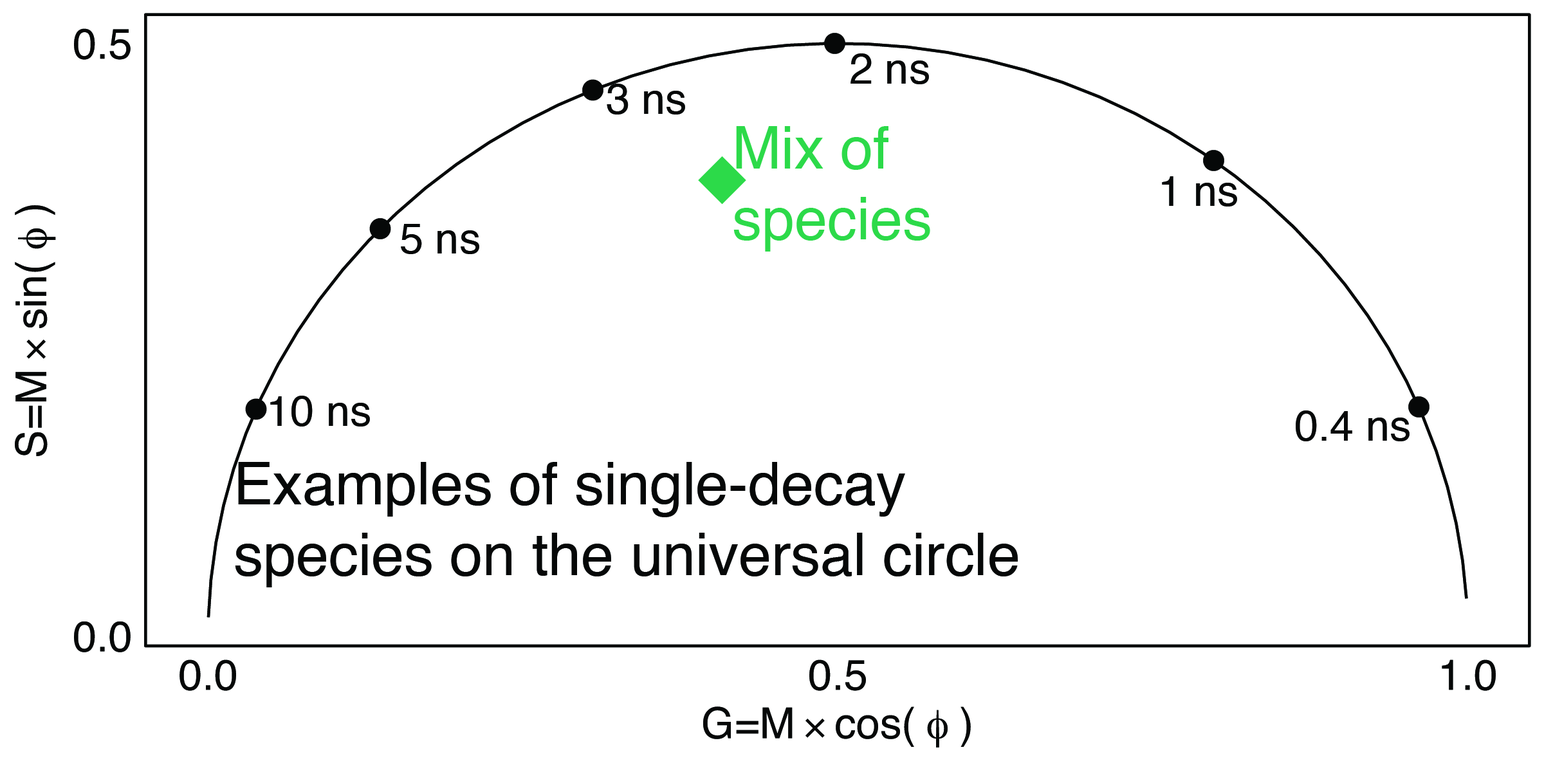
<style>
.page{position:relative;width:1544px;height:772px;background:#ffffff}
.page>*{position:absolute;margin:0}
.t1{font:42.9px "Helvetica";color:#060808}
.t2{font:59px "Helvetica";color:#2cda49}
.t3{font:59px "Helvetica";color:#060808}
</style>
<div class="page">
<p class="t1" style="left:851px;top:53px;width:78px;height:31px">2 ns</p>
<p class="t1" style="left:607px;top:84px;width:78px;height:31px">3 ns</p>
<p class="t2" style="left:734px;top:126px;width:196px;height:126px">Mix of <br>species</p>
<p class="t1" style="left:1162px;top:176px;width:75px;height:31px">1 ns</p>
<p class="t1" style="left:401px;top:224px;width:78px;height:30px">5 ns</p>
<p class="t1" style="left:270px;top:396px;width:100px;height:31px">10 ns</p>
<p class="t1" style="left:1296px;top:411px;width:114px;height:30px">0.4 ns</p>
<p class="t3" style="left:235px;top:462px;width:783px;height:125px">Examples of single-decay <br>species on the universal circle</p>
</div>
